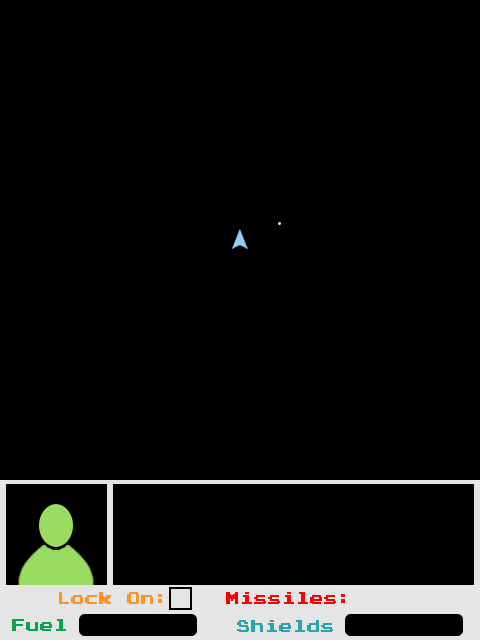
<style>
.page{position:relative;width:480px;height:640px;background:#000000}
.page>*{position:absolute;margin:0}
.t1{font:14px "PressStart2P";color:#fe942c}
.t2{font:14px "PressStart2P";color:#ff0000}
.t3{font:14px "PressStart2P";color:#07a54e}
.t4{font:14px "PressStart2P";color:#2ca2ad}
</style>
<div class="page">
<p class="t1" style="left:59px;top:592px;width:103px;height:12px">Lock On:</p>
<p class="t2" style="left:226px;top:592px;width:119px;height:12px">Missiles:</p>
<p class="t3" style="left:12px;top:619px;width:54px;height:12px">Fuel</p>
<p class="t4" style="left:237px;top:620px;width:96px;height:12px">Shields</p>
</div>
